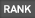
<style>
.page{position:relative;width:35px;height:18px;background:#555555}
.page>*{position:absolute;margin:0}
.t1{font:10.1px "HCRDotum-Bold";color:#ffffff}
</style>
<div class="page">
<p class="t1" style="left:4px;top:5px;width:27px;height:8px">RANK</p>
</div>
